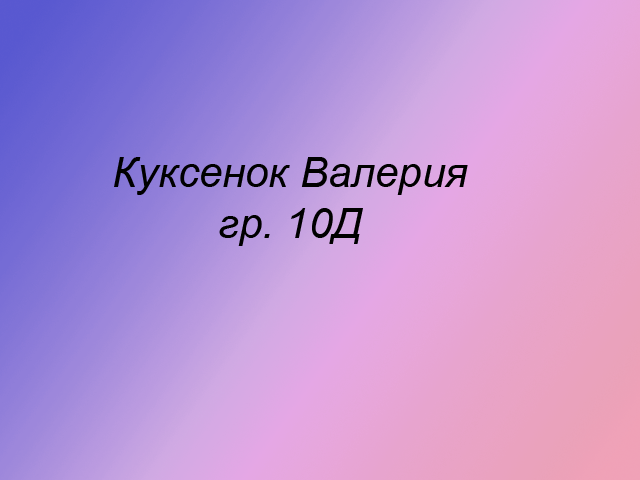
<style>
.page{position:relative;width:640px;height:480px}
.page>*{position:absolute;margin:0}
.t1{font:42px "Arial-ItalicMT";color:#000000}
</style>
<div class="page">
<p class="t1" style="left:114px;top:157px;width:354px;height:89px;text-align:center">Куксенок Валерия<br>гр. 10Д</p>
</div>
